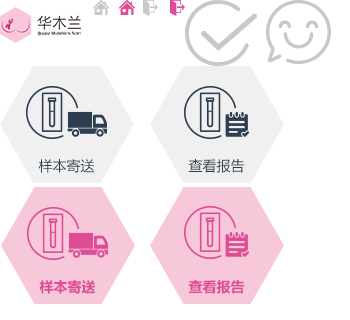
<style>
.page{position:relative;width:350px;height:320px;background:#ffffff}
.page>*{position:absolute;margin:0}
.t1{font:14px "MicrosoftYaHei";color:#2c3e50}
.t2{font:14px "MicrosoftYaHei-Bold";color:#de4c95}
</style>
<div class="page">
<p class="t1" style="left:38px;top:159px;width:57px;height:14px">样本寄送</p>
<p class="t1" style="left:188px;top:159px;width:57px;height:14px">查看报告</p>
<p class="t2" style="left:39px;top:280px;width:57px;height:14px">样本寄送</p>
<p class="t2" style="left:188px;top:280px;width:57px;height:14px">查看报告</p>
</div>
